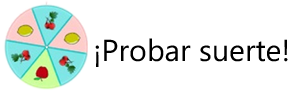
<style>
.page{position:relative;width:300px;height:91px;background:#ffffff}
.page>*{position:absolute;margin:0}
.t1{font:30.3px "SegoeUI";color:#000000}
</style>
<div class="page">
<p class="t1" style="left:95px;top:38px;width:193px;height:29px">¡Probar suerte!</p>
</div>
